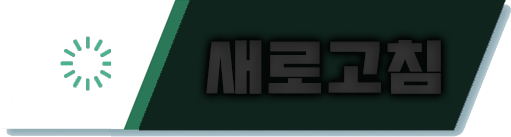
<style>
.page{position:relative;width:511px;height:137px;background:#ffffff}
.page>*{position:absolute;margin:0}
.t1{font:60px "Typo_SsangmunDong_B";color:#2e2e2e}
</style>
<div class="page">
<p class="t1" style="left:206px;top:40px;width:235px;height:54px">새로고침</p>
</div>
